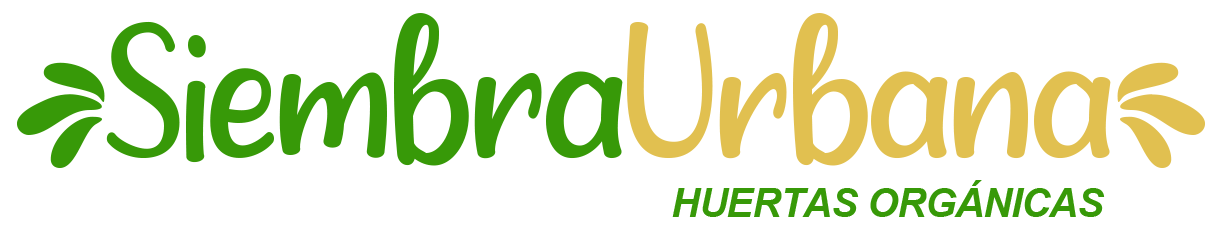
<style>
.page{position:relative;width:1228px;height:231px;background:#ffffff}
.page>*{position:absolute;margin:0}
.t1{font:200px "aAlleyGarden";letter-spacing:-0.025em;color:#379908}
.t2{font:200px "aAlleyGarden";letter-spacing:-0.025em;color:#e1c050}
.t3{font:40px "Arial-BoldItalicMT";letter-spacing:-0.025em;color:#379908}
</style>
<div class="page">
<p class="t1" style="left:17px;top:13px;width:1189px;height:156px">{Siembra<span class="t2">Urbana}</span></p>
<p class="t3" style="left:672px;top:180px;width:433px;height:37px">HUERTAS ORGÁNICAS</p>
</div>
